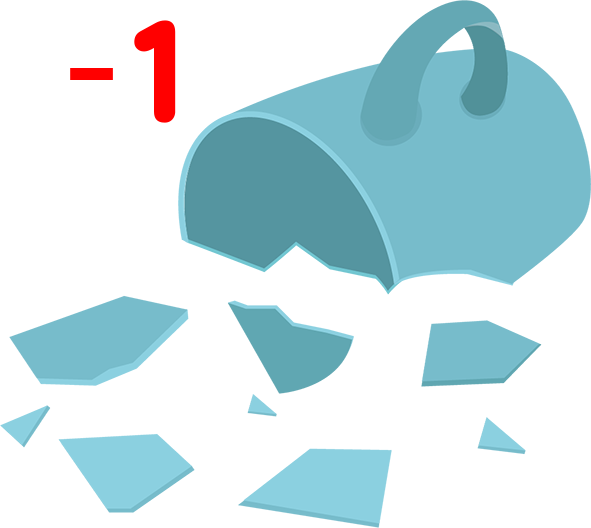
<style>
.page{position:relative;width:591px;height:528px;background:#ffffff}
.page>*{position:absolute;margin:0}
.t1{font:71px "MicrosoftJhengHeiBold";letter-spacing:-0.1em;color:#ff0000}
.t2{font:71px "DFYuanStd-W9";letter-spacing:-0.1em;color:#ff0000}
</style>
<div class="page">
<p class="t1" style="left:70px;top:20px;width:106px;height:103px">-<span class="t2">1</span></p>
</div>
